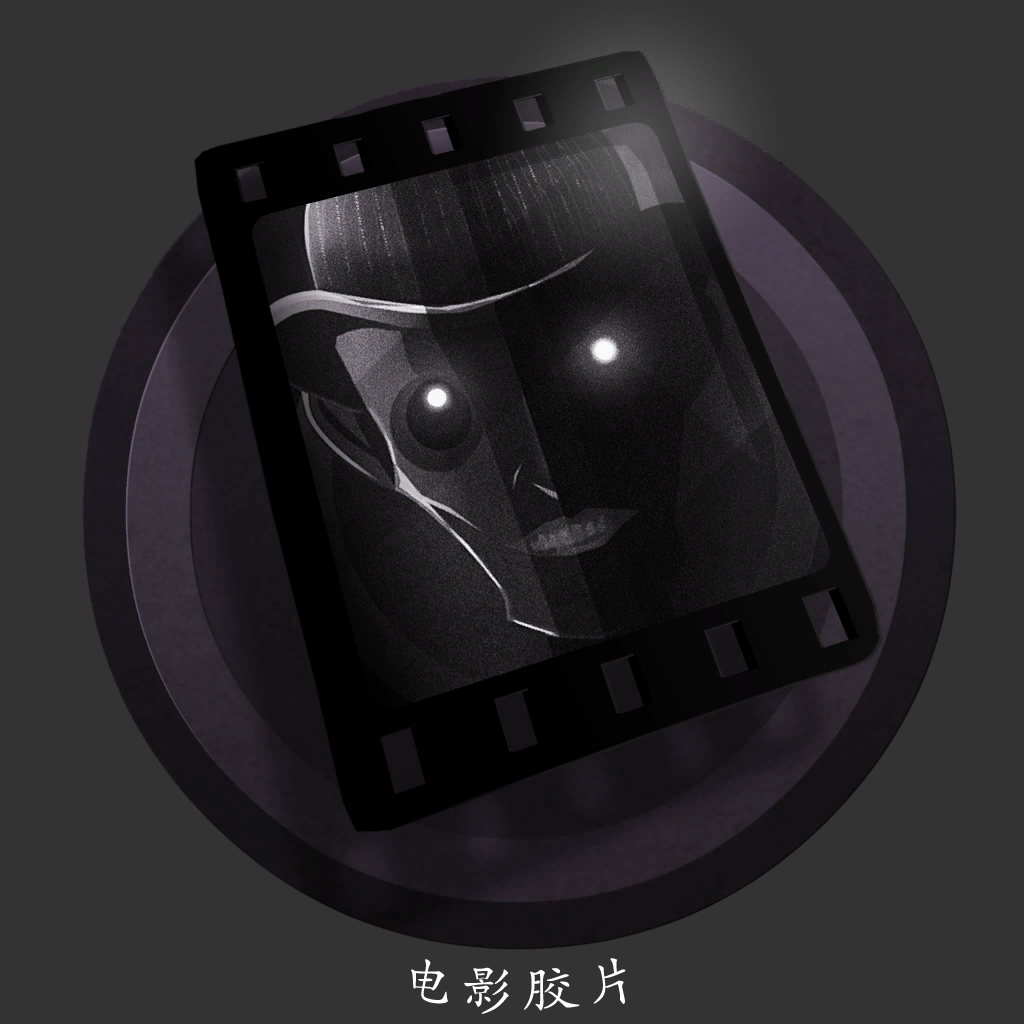
<style>
.page{position:relative;width:1024px;height:1024px;background:#333333}
.page>*{position:absolute;margin:0}
.t1{font:53.3px "STKaiti";letter-spacing:0.1em;color:#ffffff}
</style>
<div class="page">
<p class="t1" style="left:411px;top:958px;width:215px;height:56px">电影胶片</p>
</div>
